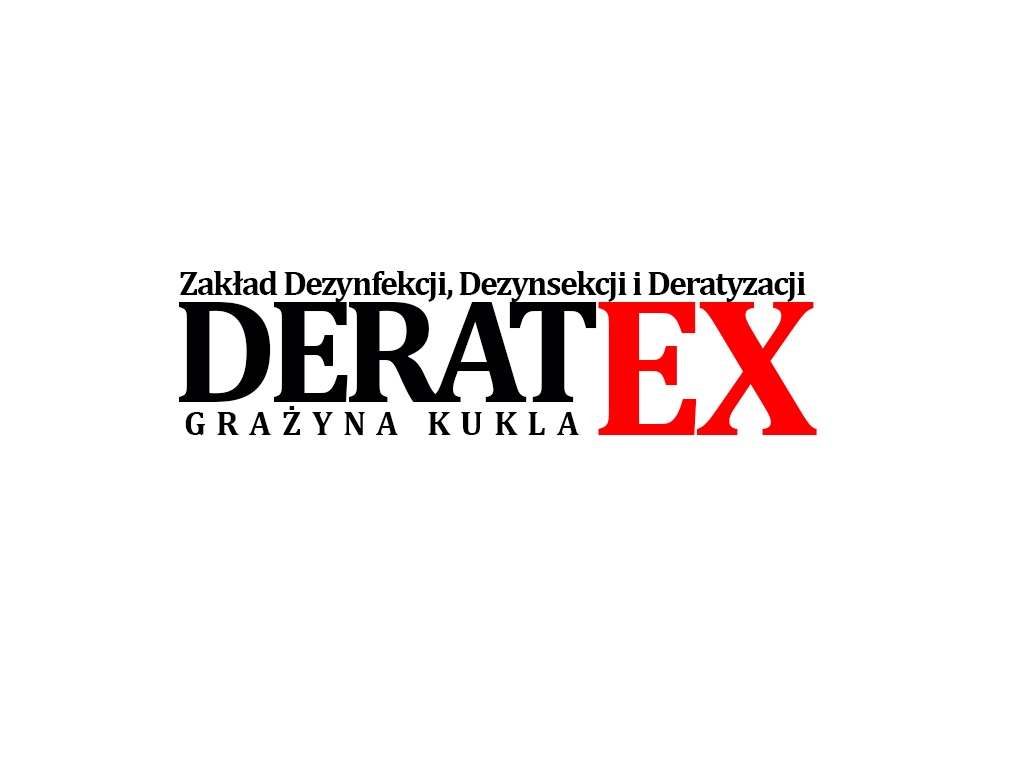
<style>
.page{position:relative;width:1024px;height:768px;background:#ffffff}
.page>*{position:absolute;margin:0}
.t1{font:34px "Cambria-Bold";letter-spacing:-0.05em;color:#000000}
.t2{font:150px "Cambria-Bold";letter-spacing:-0.075em;color:#000002}
.t3{font:200px "Cambria-Bold";letter-spacing:-0.05em;color:#ff0000}
.t4{font:34px "Cambria-Bold";letter-spacing:0.31em;color:#000000}
</style>
<div class="page">
<p class="t1" style="left:180px;top:271px;width:626px;height:31px">Zakład Dezynfekcji, Dezynsekcji i Deratyzacji</p>
<p class="t2" style="left:179px;top:302px;width:418px;height:100px">DERAT</p>
<p class="t3" style="left:598px;top:302px;width:219px;height:133px">EX</p>
<p class="t4" style="left:185px;top:406px;width:394px;height:29px">GRAŻYNA KUKLA</p>
</div>
